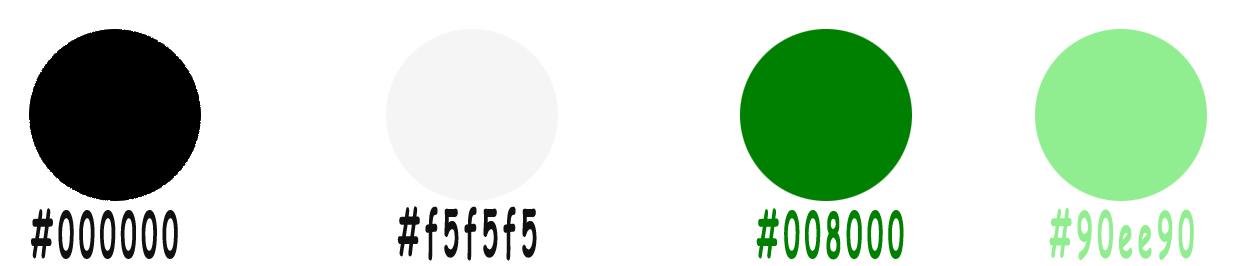
<style>
.page{position:relative;width:1240px;height:266px;background:#ffffff}
.page>*{position:absolute;margin:0}
.t1{font:62.5px "ComicSansMS-Bold";letter-spacing:0.2em;color:#101010;scale:0.41 1}
.t2{font:62.5px "ComicSansMS-Bold";letter-spacing:0.2em;color:#008000;scale:0.41 1}
.t3{font:62.5px "ComicSansMS-Bold";letter-spacing:0.2em;color:#90ee90;scale:0.41 1}
</style>
<div class="page">
<p class="t1" style="left:31px;top:208px;width:147px;height:51px">#000000</p>
<p class="t1" style="left:397px;top:206px;width:140px;height:55px">#f5f5f5</p>
<p class="t2" style="left:756px;top:208px;width:148px;height:52px">#008000</p>
<p class="t3" style="left:1049px;top:207px;width:145px;height:54px">#90ee90</p>
</div>
